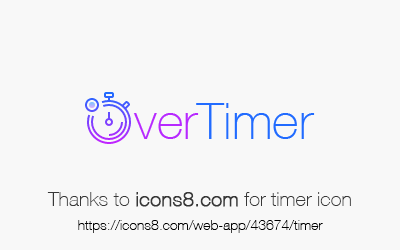
<style>
.page{position:relative;width:400px;height:250px;background:#f8f8f8}
.page>*{position:absolute;margin:0}
.t1{font:14px/24px "HelveticaNeueCE-Thin";color:#000000}
.t2{font:20px/24px "HelveticaNeueCE-Thin";color:#373737}
.t3{font:20px/24px "HelveticaNeueCE-Thin";color:#373737;font-weight:bold}
</style>
<div class="page">
<p class="t1" style="left:47px;top:192px;width:304px;height:41px;text-align:center"><span class="t2">Thanks to </span><span class="t3">icons8.com</span><span class="t2"> for timer icon<br></span>https://icons8.com/web-app/43674/timer</p>
</div>
